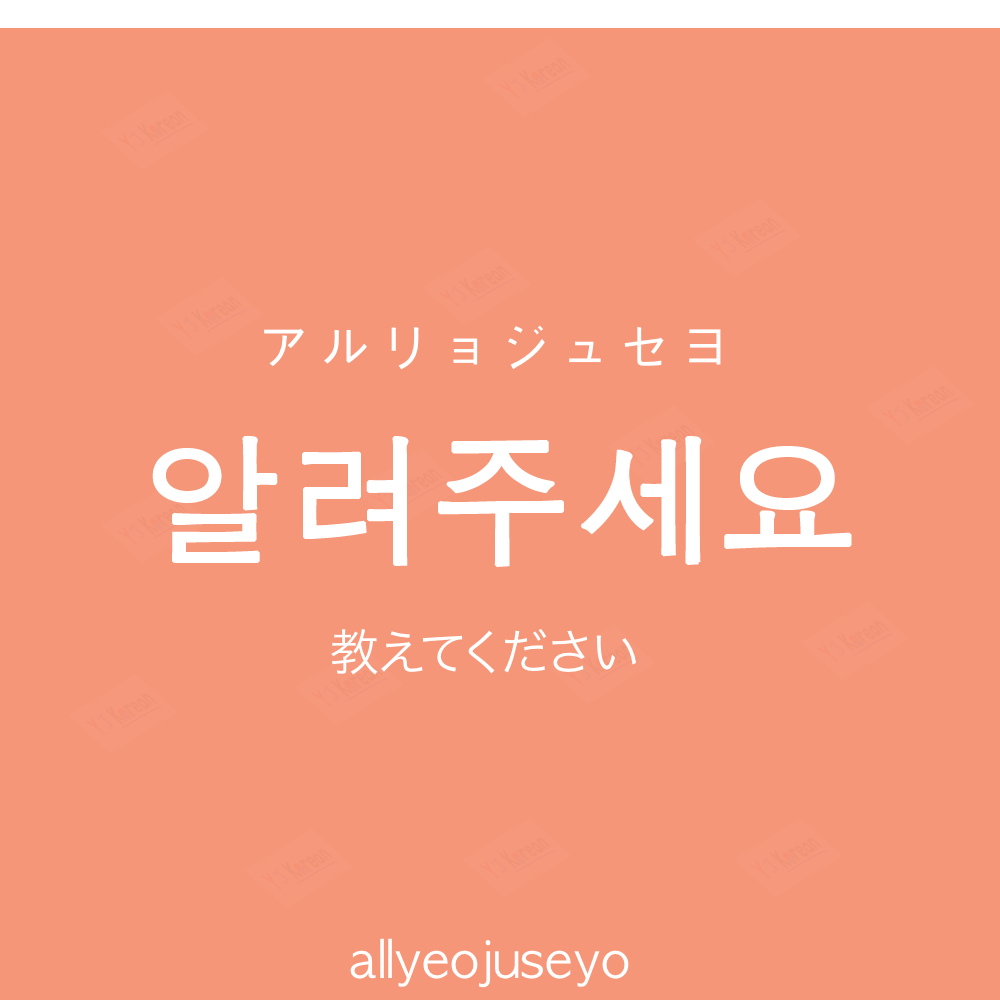
<style>
.page{position:relative;width:1000px;height:1000px;background:#f69679}
.page>*{position:absolute;margin:0}
.t1{font:60px "AppleGothic";color:#ffffff}
.t2{font:140px "AppleGothic";color:#ffffff;font-weight:bold}
.t3{font:50px "HiraKakuProN-W3";color:#ffffff}
.t4{font:50px "AppleGothic";color:#ffffff}
</style>
<div class="page">
<p class="t1" style="left:264px;top:325px;width:457px;height:45px">アルリョジュセヨ</p>
<p class="t2" style="left:152px;top:436px;width:700px;height:131px">알려주세요</p>
<p class="t3" style="left:331px;top:629px;width:305px;height:46px">教えてください</p>
<p class="t4" style="left:350px;top:938px;width:279px;height:50px">allyeojuseyo</p>
</div>
